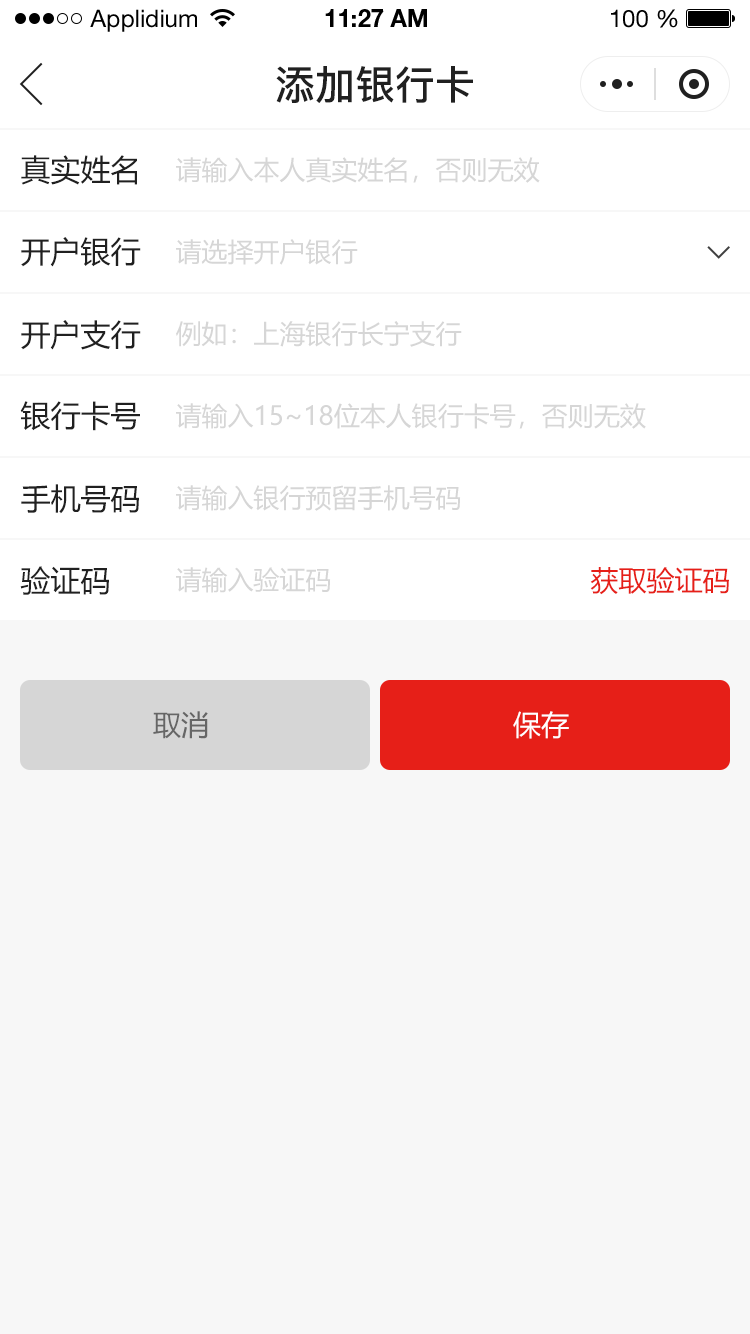
<style>
.page{position:relative;width:750px;height:1334px;background:#f7f7f7}
.page>*{position:absolute;margin:0}
.t1{font:24px "HelveticaNeueLTStd-Roman";color:#000000}
.t2{font:24px "HelveticaNeueLTStd-Bd";color:#000000}
.t3{font:40px "PingFang-SC-Bold";color:#202020;text-transform:uppercase}
.t4{font:30px "MicrosoftYaHei";color:#202020;text-transform:uppercase}
.t5{font:26px "MicrosoftYaHei";color:#d6d6d6;text-transform:uppercase}
.t6{font:28px "MicrosoftYaHei";color:#e61f18;text-transform:uppercase}
.t7{font:28px "MicrosoftYaHei";color:#666666;text-transform:uppercase}
.t8{font:28px "MicrosoftYaHei";color:#ffffff;text-transform:uppercase}
</style>
<div class="page">
<p class="t1" style="left:90px;top:9px;width:107px;height:23px">Applidium</p>
<p class="t2" style="left:325px;top:9px;width:102px;height:18px">11:27 AM</p>
<p class="t1" style="left:611px;top:9px;width:67px;height:19px">100 %</p>
<p class="t3" style="left:276px;top:66px;width:197px;height:37px">添加银行卡</p>
<p class="t4" style="left:21px;top:155px;width:116px;height:30px">真实姓名</p>
<p class="t5" style="left:176px;top:157px;width:364px;height:26px">请输入本人真实姓名，否则无效</p>
<p class="t4" style="left:21px;top:237px;width:120px;height:30px">开户银行</p>
<p class="t5" style="left:176px;top:239px;width:182px;height:26px">请选择开户银行</p>
<p class="t4" style="left:21px;top:320px;width:120px;height:30px">开户支行</p>
<p class="t5" style="left:176px;top:321px;width:286px;height:26px">例如：上海银行长宁支行</p>
<p class="t4" style="left:20px;top:401px;width:120px;height:30px">银行卡号</p>
<p class="t5" style="left:176px;top:403px;width:470px;height:26px">请输入15~18位本人银行卡号，否则无效</p>
<p class="t4" style="left:21px;top:484px;width:118px;height:30px">手机号码</p>
<p class="t5" style="left:176px;top:485px;width:285px;height:26px">请输入银行预留手机号码</p>
<p class="t4" style="left:20px;top:566px;width:89px;height:29px">验证码</p>
<p class="t5" style="left:176px;top:567px;width:155px;height:26px">请输入验证码</p>
<p class="t6" style="left:590px;top:567px;width:139px;height:28px">获取验证码</p>
<p class="t7" style="left:153px;top:711px;width:55px;height:28px">取消</p>
<p class="t8" style="left:513px;top:711px;width:56px;height:28px">保存</p>
</div>
